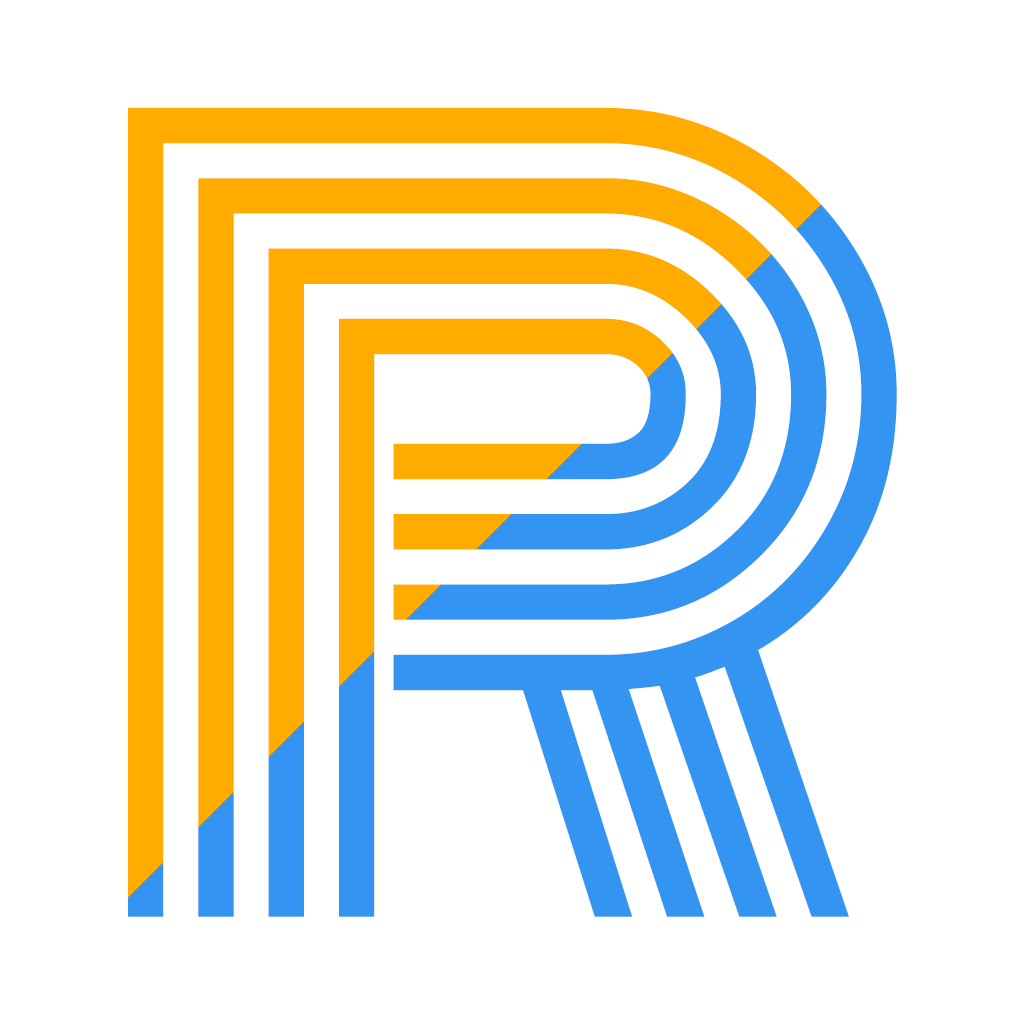
<style>
.page{position:relative;width:1024px;height:1024px;background:#ffffff}
.page>*{position:absolute;margin:0}
.t1{font:1000px "Monoton-Regular";letter-spacing:-0.065em}
</style>
<div class="page">
<p class="t1" style="left:128px;top:107px;width:769px;height:810px">R</p>
</div>
